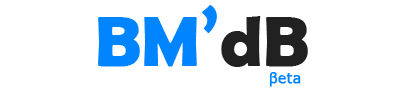
<style>
.page{position:relative;width:400px;height:100px;background:#ffffff}
.page>*{position:absolute;margin:0}
.t1{font:72px "BerlinSansFBDemi-Bold";color:#0084ff}
.t2{font:72px "BerlinSansFBDemi-Bold";color:#212121}
.t3{font:14px "Verdana";color:#0084ff;font-weight:bold}
</style>
<div class="page">
<p class="t1" style="left:98px;top:5px;width:210px;height:62px">BM’<span class="t2">dB</span></p>
<p class="t3" style="left:269px;top:72px;width:32px;height:15px">βeta</p>
</div>
